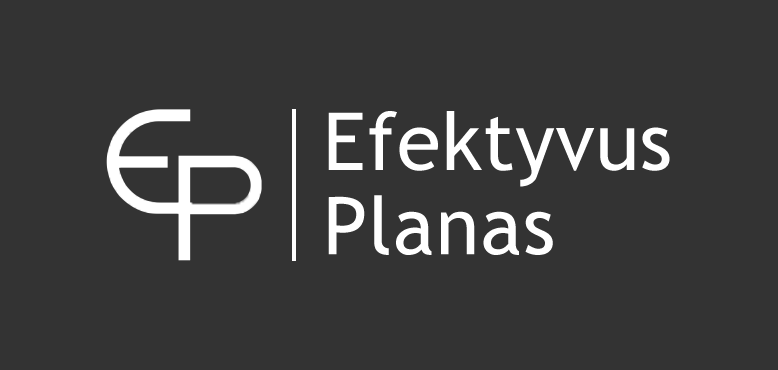
<style>
.page{position:relative;width:778px;height:370px;background:#333333}
.page>*{position:absolute;margin:0}
.t1{font:80px "TrebuchetMS";letter-spacing:0.01em;color:#ffffff}
</style>
<div class="page">
<p class="t1" style="left:328px;top:111px;width:342px;height:144px">Efektyvus<br>Planas</p>
</div>
